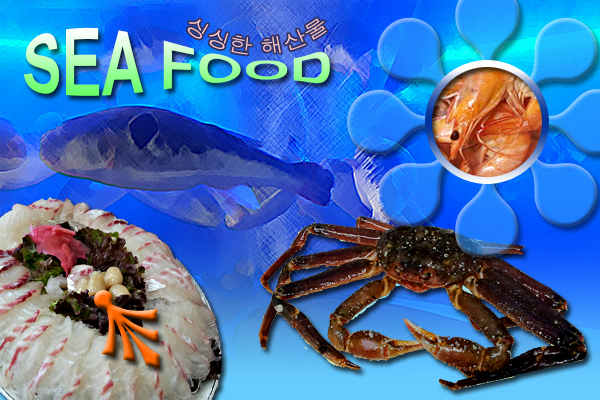
<style>
.page{position:relative;width:600px;height:400px}
.page>*{position:absolute;margin:0}
.t1{font:60px "Arial-BoldMT"}
.t2{font:20px "Dotum";color:#ffcccc}
</style>
<div class="page">
<p class="t1" style="left:24px;top:27px;width:306px;height:69px">SEA FOOD</p>
<p class="t2" style="left:187px;top:18px;width:140px;height:37px">싱싱한 해산물</p>
</div>
